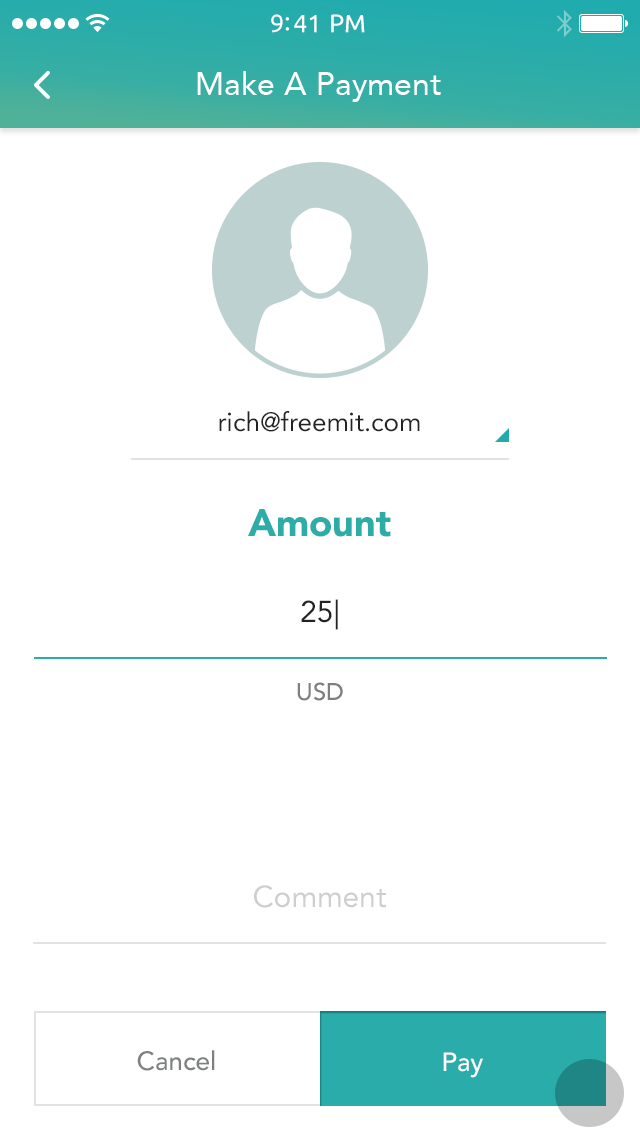
<style>
.page{position:relative;width:640px;height:1136px;background:#ffffff}
.page>*{position:absolute;margin:0}
.t1{font:25px "Ubuntu";color:#ffffff}
.t2{font:32px "Avenir-Roman";color:#ffffff}
.t3{font:26px "Avenir-Roman";color:#222325}
.t4{font:38px "Avenir-Black";color:#2eada8}
.t5{font:30px/78px "Avenir-Roman";color:#222325}
.t6{font:24px/78px "Avenir-Medium";color:#7f7f7f}
.t7{font:30px "Avenir-Roman";color:#cecece}
.t8{font:26px "Avenir-Medium";color:#7e7f7f}
.t9{font:26px "Avenir-Medium";color:#ffffff}
</style>
<div class="page">
<p class="t1" style="left:271px;top:14px;width:94px;height:19px">9:41 PM</p>
<p class="t2" style="left:197px;top:71px;width:244px;height:31px">Make A Payment</p>
<p class="t3" style="left:219px;top:411px;width:201px;height:21px">rich@freemit.com</p>
<p class="t4" style="left:248px;top:509px;width:143px;height:28px">Amount</p>
<p class="t5" style="left:297px;top:599px;width:46px;height:102px;text-align:center">25|<br><span class="t6">USD</span></p>
<p class="t7" style="left:254px;top:885px;width:132px;height:23px">Comment</p>
<p class="t8" style="left:137px;top:1050px;width:78px;height:21px">Cancel</p>
<p class="t9" style="left:443px;top:1052px;width:40px;height:26px">Pay</p>
</div>
